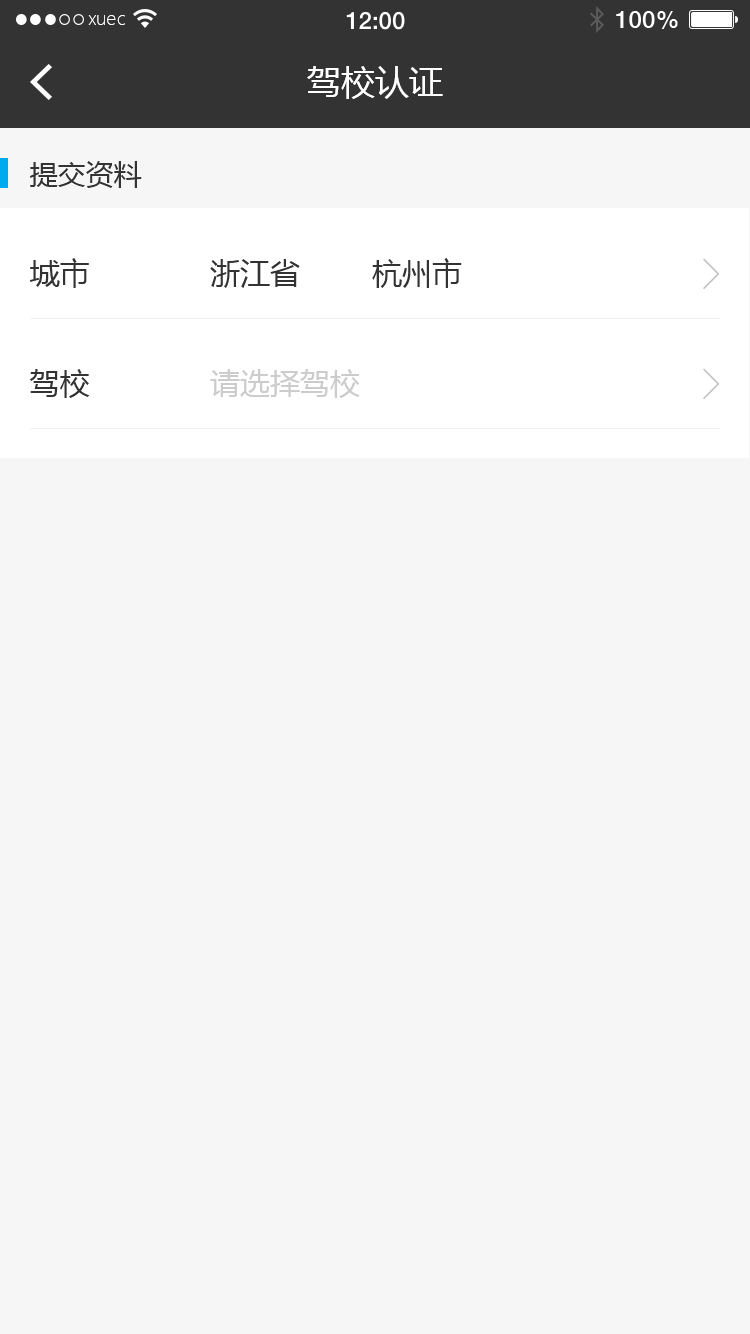
<style>
.page{position:relative;width:750px;height:1334px;background:#f6f6f6}
.page>*{position:absolute;margin:0}
.t1{font:18px "MicrosoftYaHeiLight";color:#ffffff}
.t2{font:34px "MicrosoftYaHei";color:#ffffff}
.t3{font:28px "MicrosoftYaHei";color:#333333}
.t4{font:30px "MicrosoftYaHei";color:#333333}
.t5{font:30px "MicrosoftYaHei";color:#cccccc}
</style>
<div class="page">
<p class="t1" style="left:88px;top:15px;width:37px;height:10px">xuec</p>
<p class="t2" style="left:307px;top:66px;width:136px;height:33px">驾校认证</p>
<p class="t3" style="left:30px;top:161px;width:112px;height:27px">提交资料</p>
<p class="t4" style="left:30px;top:258px;width:59px;height:30px">城市</p>
<p class="t4" style="left:210px;top:258px;width:252px;height:30px">浙江省        杭州市</p>
<p class="t4" style="left:29px;top:369px;width:61px;height:29px">驾校</p>
<p class="t5" style="left:210px;top:369px;width:150px;height:29px">请选择驾校</p>
</div>
